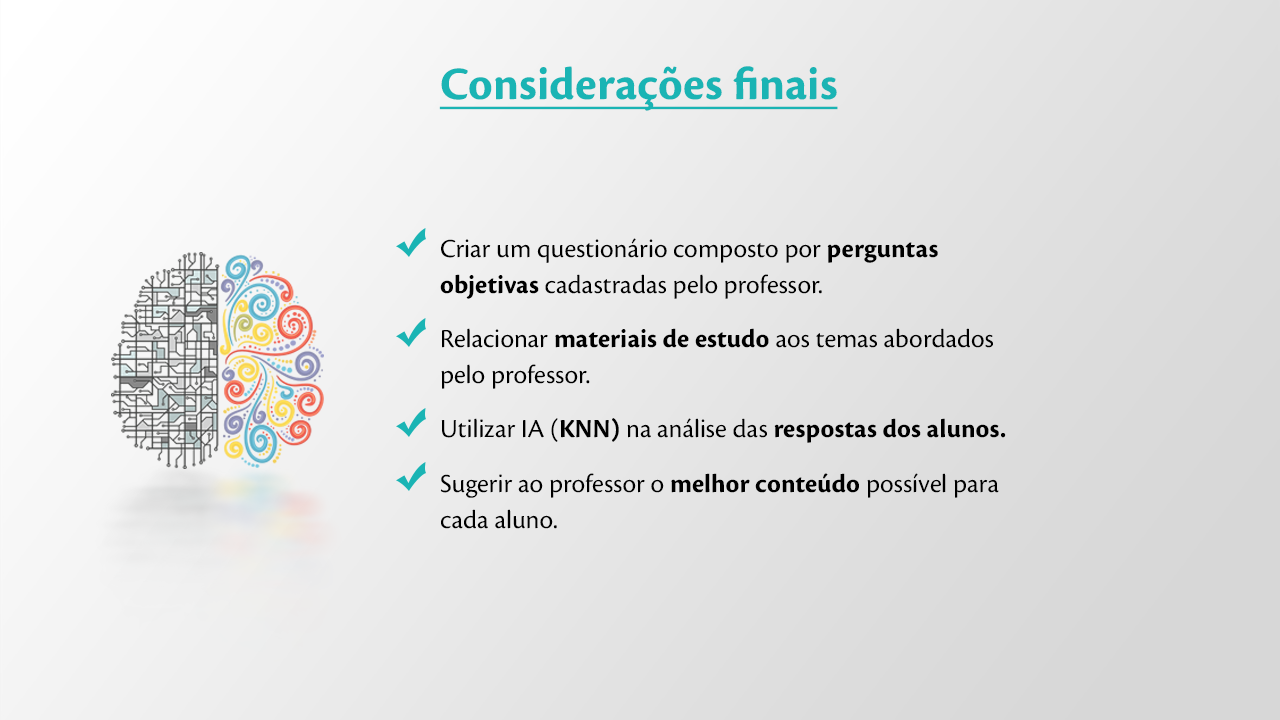
<style>
.page{position:relative;width:1280px;height:720px}
.page>*{position:absolute;margin:0}
.t1{font:48px "CronosPro-Bold";color:#1ab4b4;text-decoration:underline}
.t2{font:27px/36px "CronosPro-Regular";color:#000000}
.t3{font:27px/36px "CronosPro-Bold";color:#000000}
.t4{font:27px/18px "CronosPro-Regular";color:#000000}
.t5{font:27px/18px "CronosPro-Bold";color:#000000}
</style>
<div class="page">
<p class="t1" style="left:439px;top:66px;width:399px;height:45px">Considerações finais</p>
<p class="t2" style="left:440px;top:238px;width:566px;height:291px">Criar um questionário composto por <span class="t3">perguntas objetivas </span>cadastradas pelo pro<span class="t4">fessor.<br><br></span>Relacionar <span class="t3">materiais de estudo</span> aos temas abordados pelo professor.<br><br><span class="t4"><br>Utilizar IA (</span><span class="t5">KNN)</span><span class="t4"> na análise das </span><span class="t5">respostas dos alunos.<br><br></span><span class="t4">Su</span>gerir ao professor o <span class="t3">melhor conteúdo</span> possível para cada aluno.</p>
</div>
